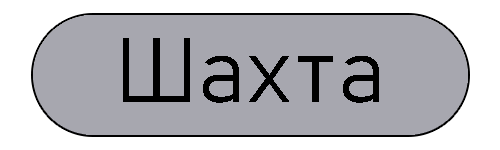
<style>
.page{position:relative;width:500px;height:150px;background:#a7a7af}
.page>*{position:absolute;margin:0}
.t1{font:90px "Bahnschrift-Bold";color:#000000}
</style>
<div class="page">
<p class="t1" style="left:123px;top:38px;width:256px;height:65px">Шахта</p>
</div>
